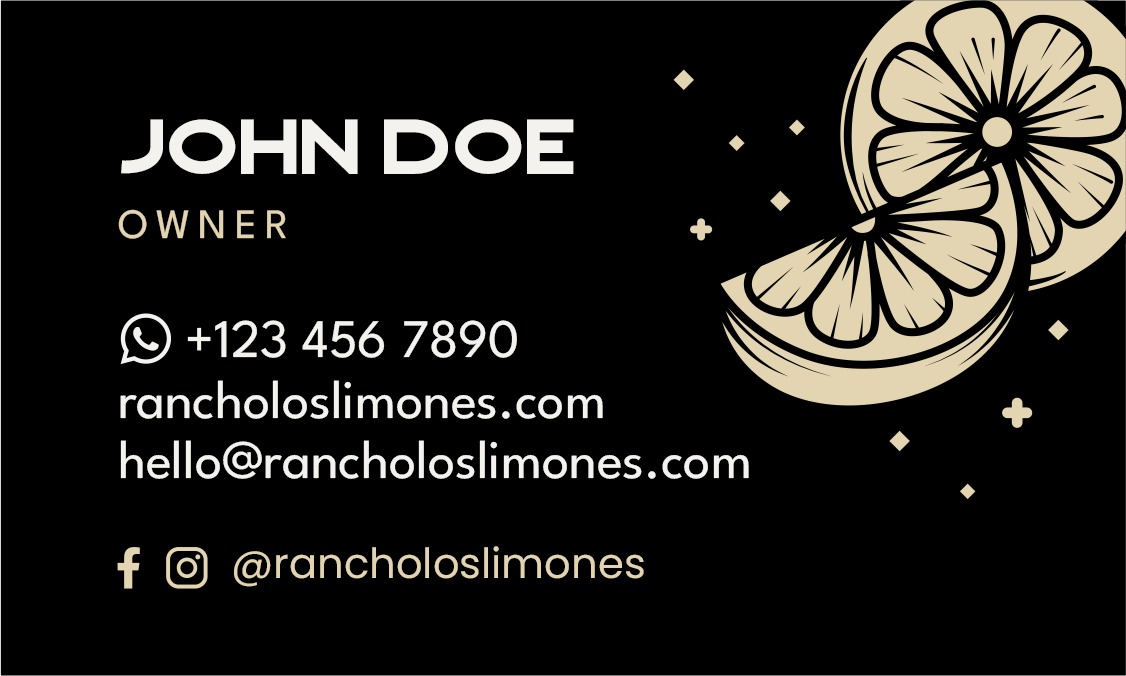
<style>
.page{position:relative;width:1126px;height:676px;background:#000000}
.page>*{position:absolute;margin:0}
.t1{font:77.9px "Crafter-Regular";color:#f4f2ef}
.t2{font:41.7px "LeagueSpartan-Regular";letter-spacing:0.2em;color:#e3d5b1;text-transform:uppercase}
.t3{font:54.2px/60.4px "LeagueSpartan-Regular";color:#f4f2ef}
.t4{font:41.7px "Poppins-Regular";color:#e3d5b1}
</style>
<div class="page">
<p class="t1" style="left:121px;top:119px;width:453px;height:55px">John Doe</p>
<p class="t2" style="left:118px;top:209px;width:168px;height:30px">owner</p>
<p class="t3" style="left:120px;top:320px;width:629px;height:159px">+123 456 7890<br>rancholoslimones.com<br>hello@rancholoslimones.com</p>
<p class="t4" style="left:234px;top:546px;width:410px;height:41px">@rancholoslimones</p>
</div>
